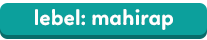
<style>
.page{position:relative;width:207px;height:40px;background:#0ca09c}
.page>*{position:absolute;margin:0}
.t1{font:22px "Linotte-Bold";color:#ffffff}
</style>
<div class="page">
<p class="t1" style="left:35px;top:9px;width:138px;height:21px">lebel: mahirap</p>
</div>
